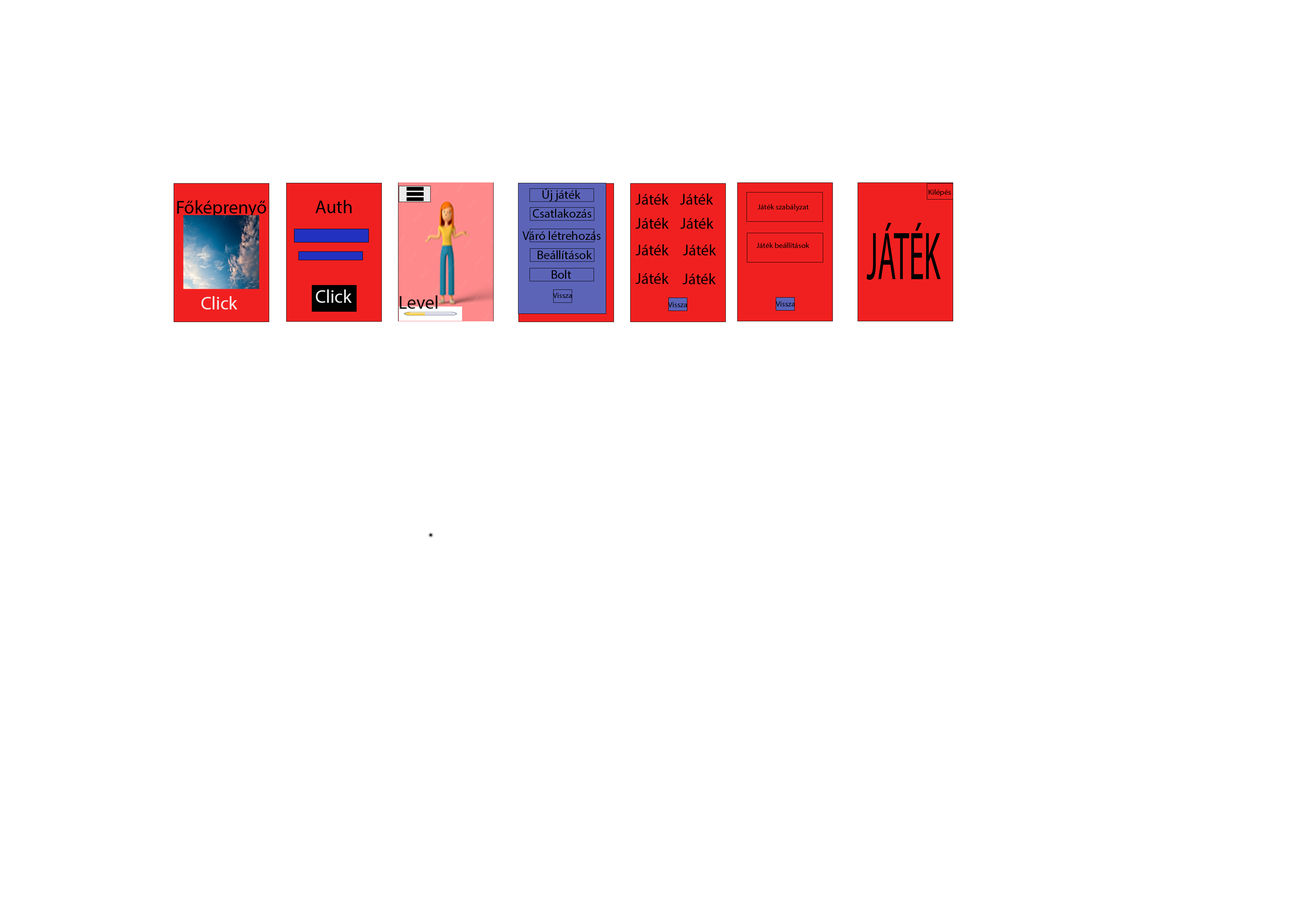
<style>
.page{position:relative;width:1299px;height:918px;background:#ffffff}
.page>*{position:absolute;margin:0}
.t1{font:12.3px "MyriadPro-Regular";color:#000000}
.t2{font:15.4px "MyriadPro-Regular";color:#000000}
.t3{font:7.7px "MyriadPro-Regular";color:#000000}
.t4{font:18.5px "MyriadPro-Regular";color:#000000}
.t5{font:68.1px "MyriadPro-Regular";color:#000000;scale:0.44 1}
.t6{font:18.5px "MyriadPro-Regular";color:#ebebec}
.t7{font:18.5px "MyriadPro-Regular";color:#f7e6e6}
</style>
<div class="page">
<p class="t1" style="left:542px;top:188px;width:39px;height:13px">Új játék</p>
<p class="t2" style="left:635px;top:194px;width:34px;height:11px">Játék</p>
<p class="t2" style="left:680px;top:194px;width:33px;height:11px">Játék</p>
<p class="t3" style="left:928px;top:189px;width:23px;height:7px">Kilépés</p>
<p class="t4" style="left:177px;top:200px;width:89px;height:18px">Főképrenyő</p>
<p class="t4" style="left:315px;top:200px;width:37px;height:13px">Auth</p>
<p class="t1" style="left:533px;top:209px;width:58px;height:9px">Csatlakozás</p>
<p class="t3" style="left:757px;top:204px;width:52px;height:7px">Játék szabályzat</p>
<p class="t2" style="left:635px;top:218px;width:34px;height:11px">Játék</p>
<p class="t2" style="left:680px;top:218px;width:33px;height:11px">Játék</p>
<p class="t1" style="left:522px;top:231px;width:78px;height:9px">Váró létrehozás</p>
<p class="t5" style="left:866px;top:223px;width:75px;height:57px">JÁTÉK</p>
<p class="t2" style="left:635px;top:244px;width:34px;height:11px">Játék</p>
<p class="t2" style="left:683px;top:244px;width:33px;height:11px">Játék</p>
<p class="t3" style="left:756px;top:242px;width:53px;height:6px">Játék beállítások</p>
<p class="t1" style="left:538px;top:250px;width:54px;height:9px">Beállítások</p>
<p class="t1" style="left:552px;top:270px;width:19px;height:9px">Bolt</p>
<p class="t2" style="left:635px;top:273px;width:34px;height:11px">Játék</p>
<p class="t2" style="left:682px;top:273px;width:34px;height:11px">Játék</p>
<p class="t6" style="left:316px;top:290px;width:36px;height:13px">Click</p>
<p class="t3" style="left:553px;top:293px;width:19px;height:5px">Vissza</p>
<p class="t7" style="left:201px;top:296px;width:36px;height:14px">Click</p>
<p class="t4" style="left:399px;top:295px;width:38px;height:14px">Level</p>
<p class="t3" style="left:668px;top:302px;width:19px;height:5px">Vissza</p>
<p class="t3" style="left:776px;top:301px;width:19px;height:6px">Vissza</p>
</div>
